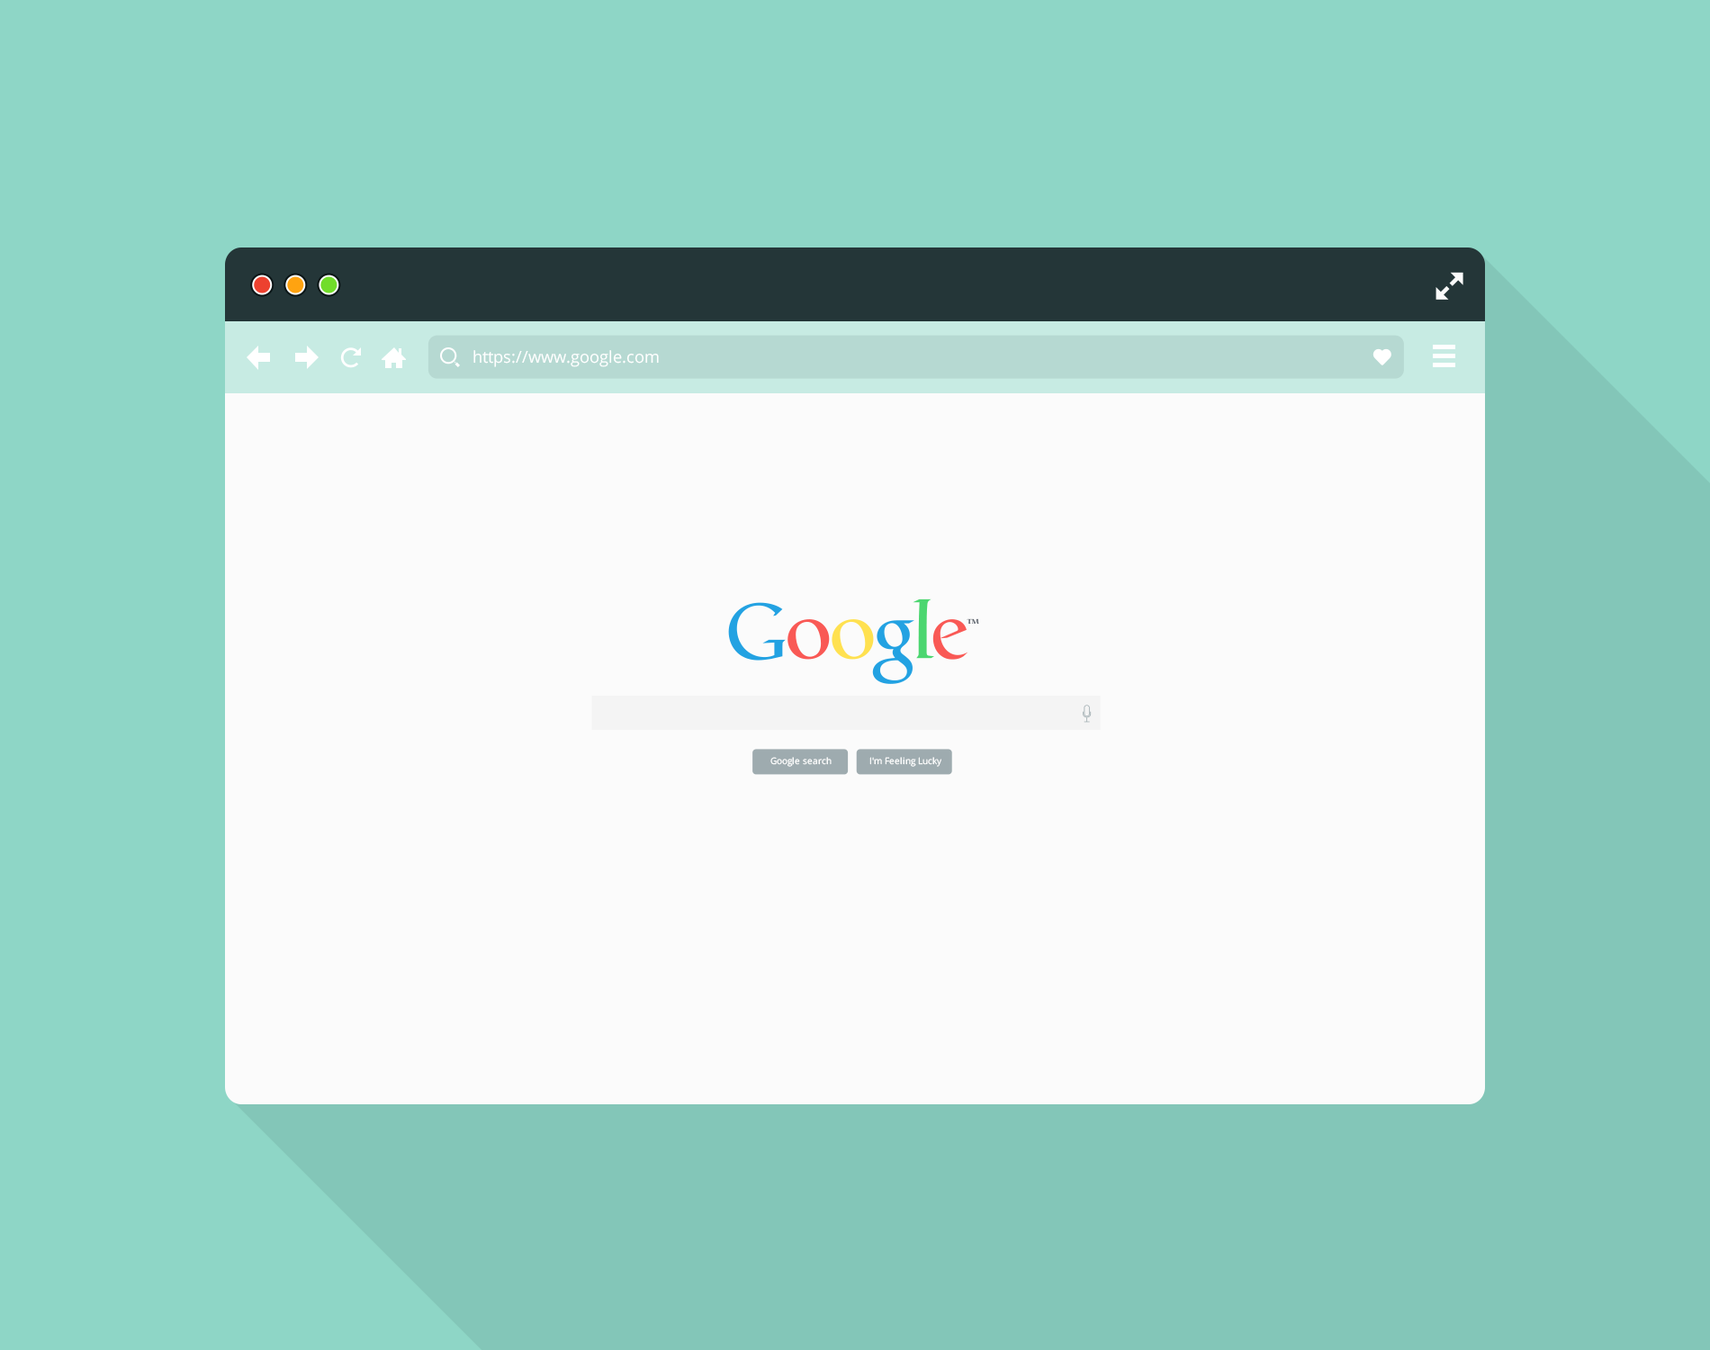
<style>
.page{position:relative;width:1710px;height:1350px;background:#fbfbfb}
.page>*{position:absolute;margin:0}
.t1{font:16.4px "OpenSans";color:#ffffff}
.t2{font:9px "OpenSans";color:#ffffff}
</style>
<div class="page">
<p class="t1" style="left:473px;top:350px;width:186px;height:17px">https://www.google.com</p>
<p class="t2" style="left:770px;top:757px;width:62px;height:10px">Google search</p>
<p class="t2" style="left:869px;top:757px;width:72px;height:10px">I'm Feeling Lucky</p>
</div>
